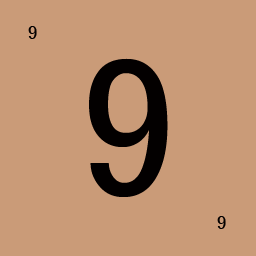
<style>
.page{position:relative;width:256px;height:256px;background:#ca9b78}
.page>*{position:absolute;margin:0}
.t1{font:20px "SimHei";letter-spacing:0.02em;color:#030000}
.t2{font:200px "SimHei";letter-spacing:0.02em;color:#030000}
</style>
<div class="page">
<p class="t1" style="left:28px;top:26px;width:9px;height:13px">9</p>
<p class="t2" style="left:89px;top:58px;width:79px;height:139px">9</p>
<p class="t1" style="left:217px;top:216px;width:9px;height:13px">9</p>
</div>
